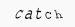
<style>
.page{position:relative;width:75px;height:27px;background:#f9f9f9}
.page>*{position:absolute;margin:0}
.t1{font:14.6px "CourierNewPSMT";letter-spacing:0.18em;color:#111111;font-style:italic;scale:0.91 1}
.t2{font:14.6px "CourierNewPSMT";letter-spacing:0.18em;color:#111111;scale:0.91 1}
</style>
<div class="page">
<p class="t1" style="left:15px;top:7px;width:48px;height:13px">cat<span class="t2">ch</span></p>
</div>
